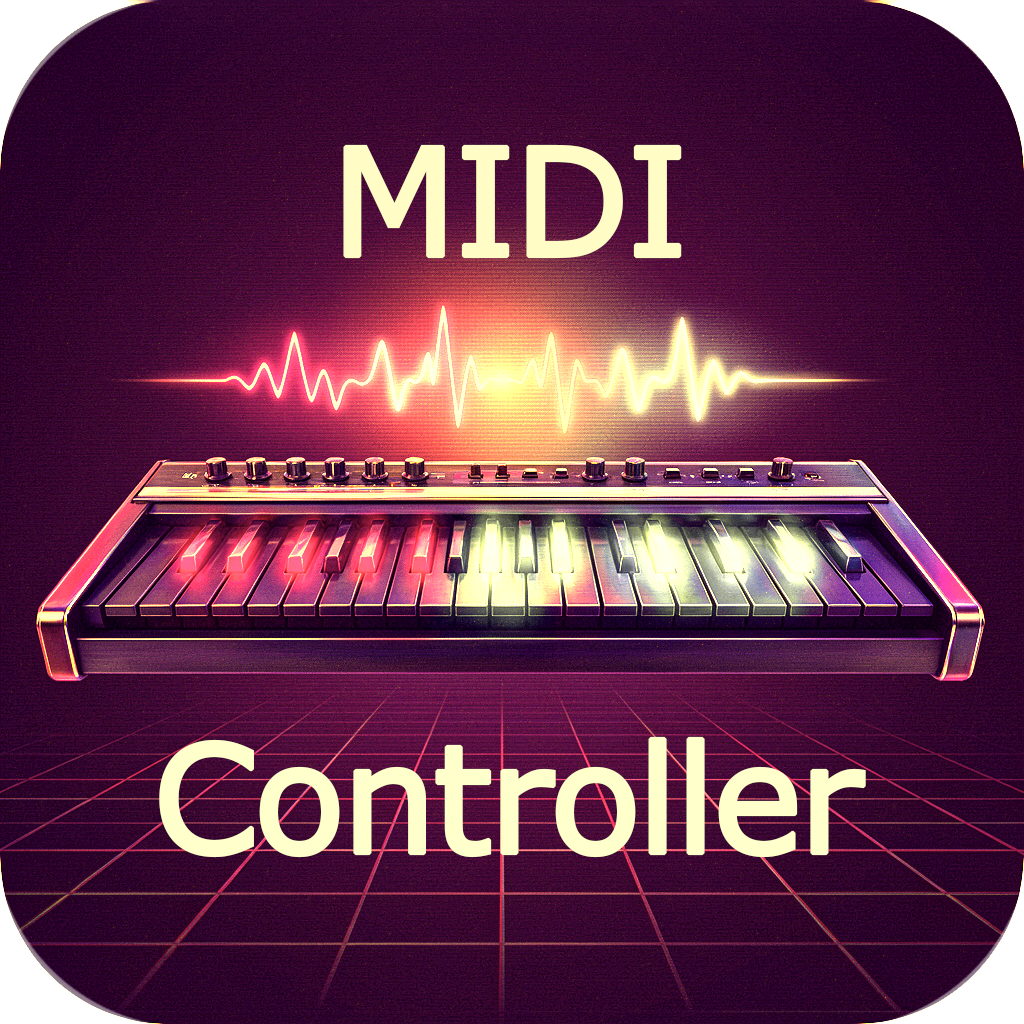
<style>
.page{position:relative;width:1024px;height:1024px}
.page>*{position:absolute;margin:0}
.t1{font:150px "Verdana";letter-spacing:-0.05em;color:#fffdc5;font-weight:bold}
.t2{font:150px "Verdana";letter-spacing:-0.05em;color:#ffffcb;font-weight:bold}
</style>
<div class="page">
<p class="t1" style="left:343px;top:144px;width:339px;height:115px">MIDI</p>
<p class="t2" style="left:159px;top:736px;width:707px;height:122px">Controller</p>
</div>
